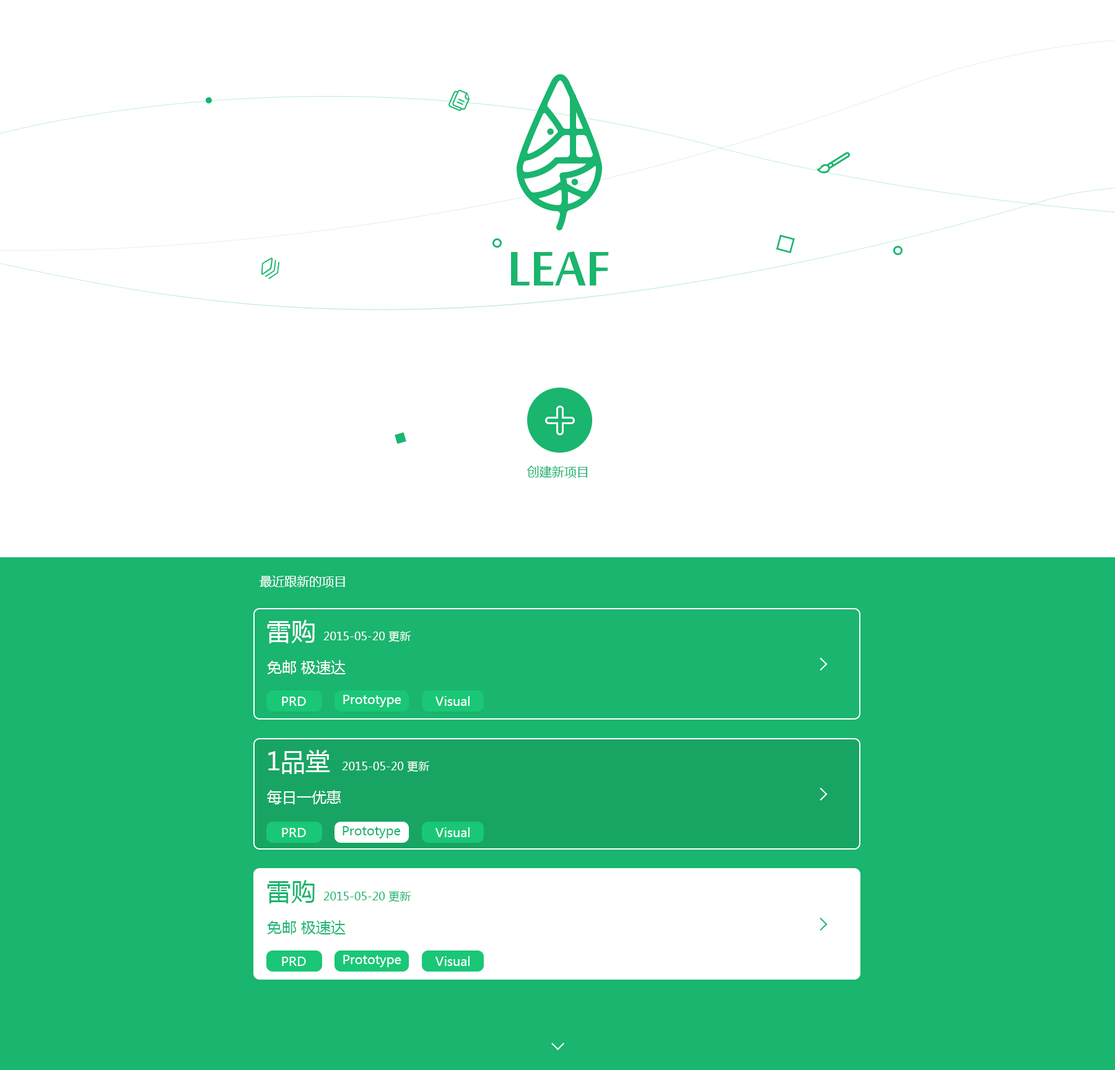
<style>
.page{position:relative;width:1115px;height:1070px;background:#ffffff}
.page>*{position:absolute;margin:0}
.t1{font:74.3px "MoolBoran";color:#1ab56e}
.t2{font:12.4px "MicrosoftYaHei";color:#1ab56e}
.t3{font:12.4px "MicrosoftYaHei";color:#ffffff}
.t4{font:24.8px "MicrosoftYaHei";color:#ffffff}
.t5{font:11.1px "MicrosoftYaHei";color:#ffffff}
.t6{font:14.9px "MicrosoftYaHei";color:#ffffff}
.t7{font:24.8px "MicrosoftYaHei";color:#1ab56e}
.t8{font:11.1px "MicrosoftYaHei";color:#1ab56e}
.t9{font:14.9px "MicrosoftYaHei";color:#1ab56e}
</style>
<div class="page">
<p class="t1" style="left:511px;top:251px;width:98px;height:34px">LEAF</p>
<p class="t2" style="left:527px;top:466px;width:60px;height:12px">创建新项目</p>
<p class="t3" style="left:259px;top:575px;width:86px;height:13px">最近跟新的项目</p>
<p class="t4" style="left:267px;top:620px;width:48px;height:23px">雷购</p>
<p class="t5" style="left:323px;top:631px;width:88px;height:11px">2015-05-20 更新</p>
<p class="t6" style="left:267px;top:660px;width:78px;height:14px">免邮 极速达</p>
<p class="t3" style="left:282px;top:697px;width:24px;height:9px">PRD</p>
<p class="t3" style="left:343px;top:695px;width:58px;height:12px">Prototype</p>
<p class="t3" style="left:435px;top:696px;width:34px;height:10px">Visual</p>
<p class="t4" style="left:268px;top:750px;width:62px;height:24px">1品堂</p>
<p class="t5" style="left:342px;top:761px;width:88px;height:11px">2015-05-20 更新</p>
<p class="t6" style="left:267px;top:790px;width:74px;height:14px">每日一优惠</p>
<p class="t3" style="left:282px;top:828px;width:24px;height:9px">PRD</p>
<p class="t2" style="left:342px;top:826px;width:59px;height:12px">Prototype</p>
<p class="t3" style="left:435px;top:827px;width:34px;height:10px">Visual</p>
<p class="t7" style="left:267px;top:880px;width:48px;height:23px">雷购</p>
<p class="t8" style="left:323px;top:891px;width:88px;height:11px">2015-05-20 更新</p>
<p class="t9" style="left:267px;top:920px;width:78px;height:14px">免邮 极速达</p>
<p class="t3" style="left:282px;top:957px;width:24px;height:9px">PRD</p>
<p class="t3" style="left:343px;top:955px;width:58px;height:12px">Prototype</p>
<p class="t3" style="left:435px;top:956px;width:34px;height:10px">Visual</p>
</div>
